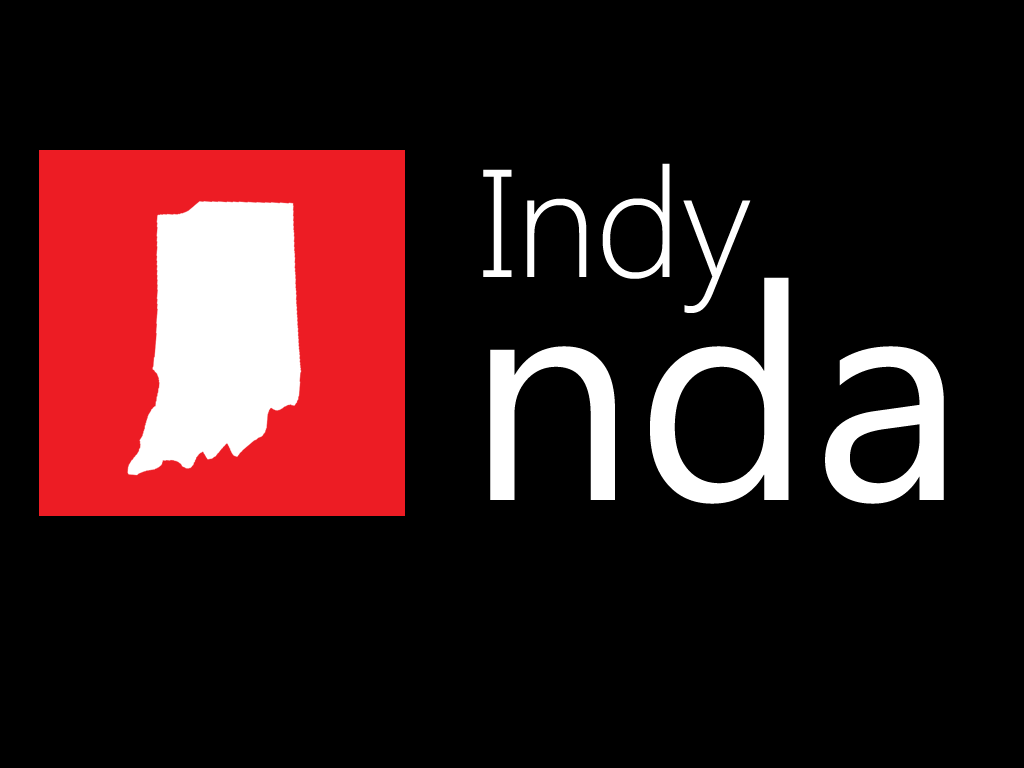
<style>
.page{position:relative;width:1024px;height:768px;background:#000000}
.page>*{position:absolute;margin:0}
.t1{font:153px "SegoeUI-Light";color:#ffffff}
.t2{font:300px "SegoeUI";color:#ffffff}
</style>
<div class="page">
<p class="t1" style="left:483px;top:163px;width:268px;height:150px">Indy</p>
<p class="t2" style="left:490px;top:277px;width:454px;height:227px">nda</p>
</div>
